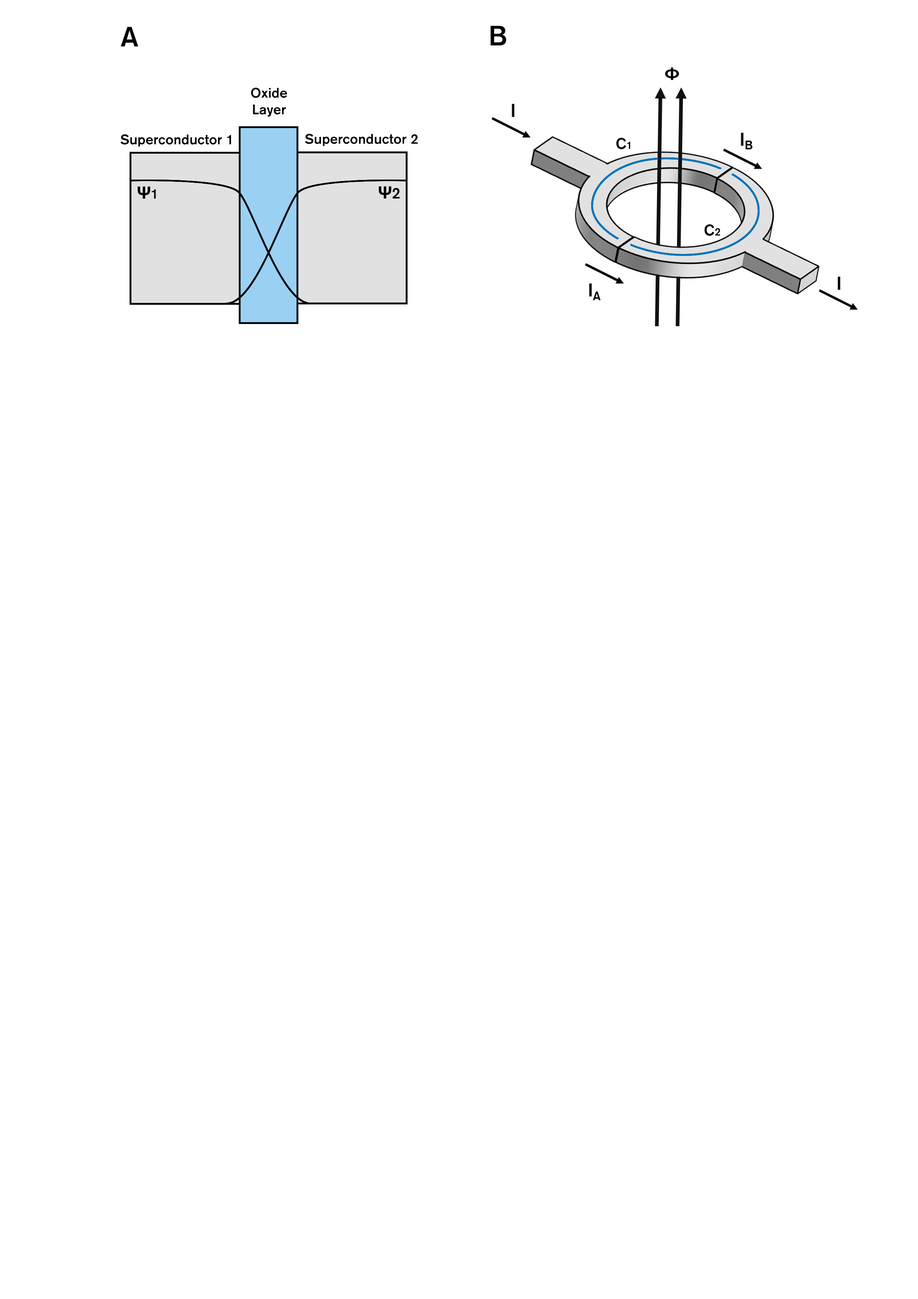
<style>
.page{position:relative;width:918px;height:1299px;background:#ffffff}
.page>*{position:absolute;margin:0}
.t1{font:27.8px "AkzidenzGroteskBQ-Medium";color:#000000}
.t2{font:13.9px "AkzidenzGroteskBQ-Medium";color:#000000}
.t3{font:17px "Arial-BoldMT";color:#000000}
.t4{font:15.4px "AkzidenzGroteskBQ-Medium";color:#000000}
</style>
<div class="page">
<p class="t1" style="left:121px;top:27px;width:17px;height:20px">A</p>
<p class="t1" style="left:491px;top:26px;width:15px;height:20px">B</p>
<p class="t2" style="left:251px;top:87px;width:36px;height:30px;text-align:center">Oxide<br>Layer</p>
<p class="t2" style="left:120px;top:134px;width:111px;height:13px">Superconductor 1</p>
<p class="t2" style="left:305px;top:134px;width:113px;height:12px">Superconductor 2</p>
<p class="t3" style="left:138px;top:186px;width:18px;height:13px">Ψ<span class="t2">1</span></p>
<p class="t3" style="left:379px;top:186px;width:21px;height:12px">Ψ<span class="t4">2</span></p>
</div>
